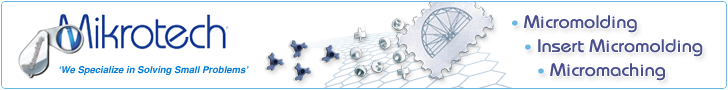
<style>
.page{position:relative;width:728px;height:90px;background:#ffffff}
.page>*{position:absolute;margin:0}
.t1{font:18px/24px "Bauhaus-Medium";letter-spacing:0.005em;color:#4a508e;scale:1.1 1}
.t2{font:14px/24px "Bauhaus-Medium";letter-spacing:0.005em;color:#6bb7e2;scale:1.1 1}
.t3{font:9.5px "Helvetica-BoldOblique";color:#007bd9}
</style>
<div class="page">
<p class="t1" style="left:512px;top:15px;width:191px;height:66px"><span class="t2">• </span>Micromolding<br><span class="t2">   • </span>Insert Micromolding<br><span class="t2">      • </span>Micromaching</p>
<p class="t3" style="left:59px;top:66px;width:190px;height:9px">‘We Specialize in Solving Small Problems’</p>
</div>
